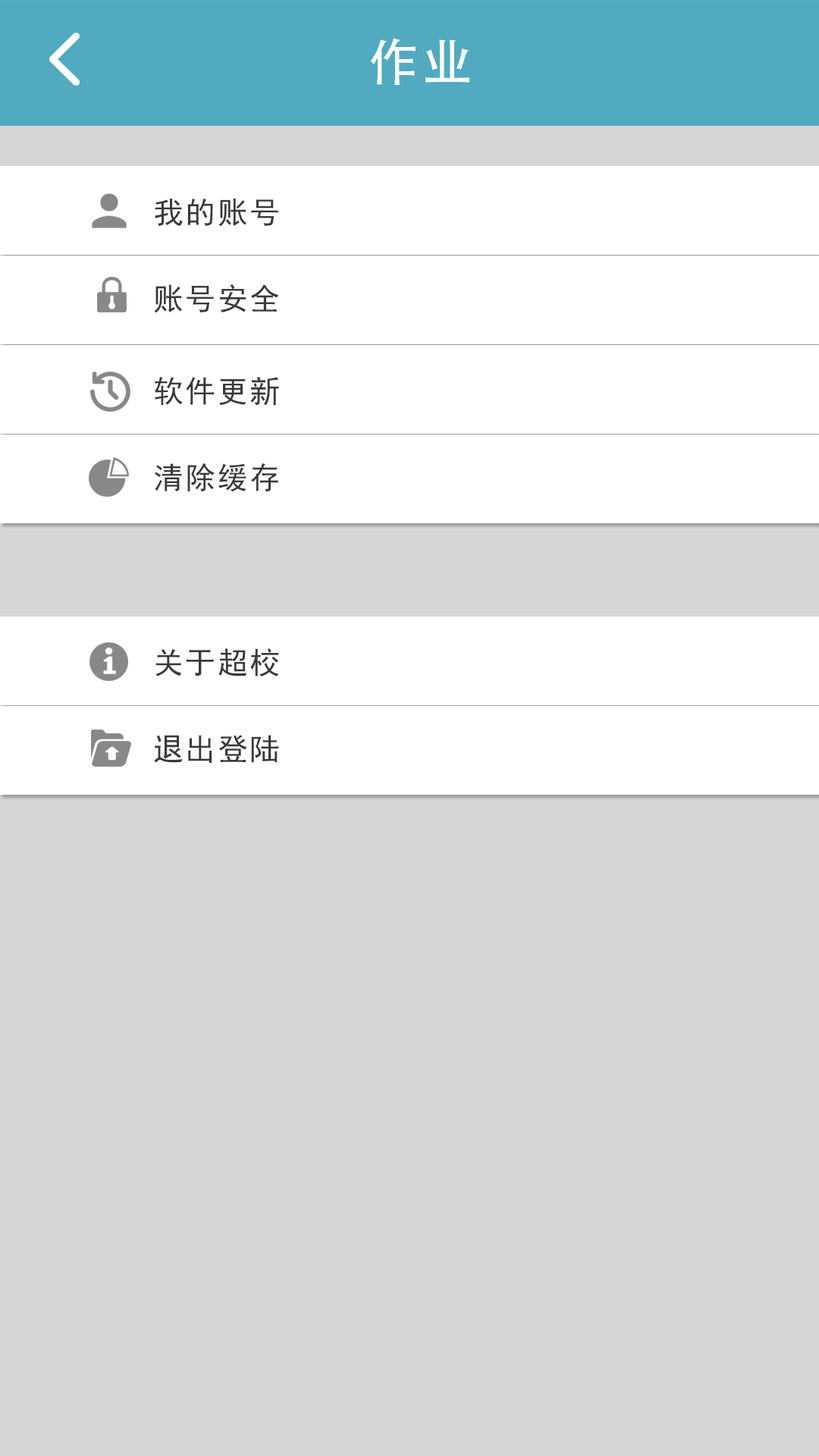
<style>
.page{position:relative;width:819px;height:1456px;background:#d6d6d6}
.page>*{position:absolute;margin:0}
.t1{font:50.8px "AdobeHeitiStd-Regular";letter-spacing:0.06em;color:#ffffff}
.t2{font:30.3px "SimHei";letter-spacing:0.06em;color:#393939}
.t3{font:30.6px "SimHei";letter-spacing:0.06em;color:#393939}
</style>
<div class="page">
<p class="t1" style="left:370px;top:38px;width:99px;height:47px">作业</p>
<p class="t2" style="left:155px;top:198px;width:123px;height:29px">我的账号</p>
<p class="t3" style="left:154px;top:284px;width:125px;height:29px">账号安全</p>
<p class="t3" style="left:155px;top:376px;width:124px;height:30px">软件更新</p>
<p class="t3" style="left:155px;top:463px;width:123px;height:29px">清除缓存</p>
<p class="t3" style="left:155px;top:648px;width:124px;height:28px">关于超校</p>
<p class="t3" style="left:154px;top:735px;width:124px;height:28px">退出登陆</p>
</div>
